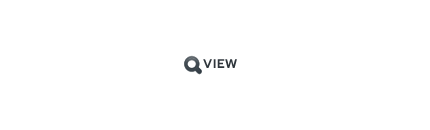
<style>
.page{position:relative;width:430px;height:130px;background:#ffffff}
.page>*{position:absolute;margin:0}
.t1{font:12px "nevis-Bold";color:#2f363c}
</style>
<div class="page">
<p class="t1" style="left:203px;top:59px;width:34px;height:9px">VIEW</p>
</div>
